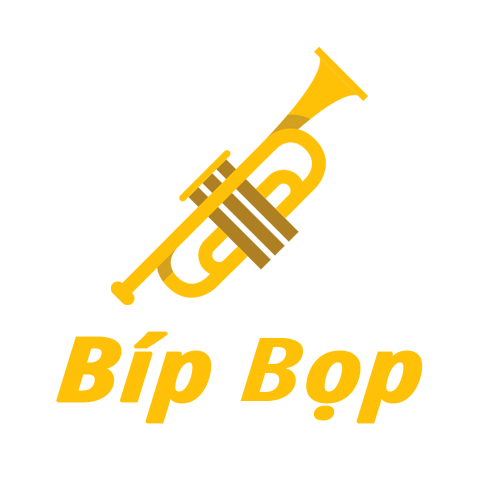
<style>
.page{position:relative;width:480px;height:480px;background:#ffffff}
.page>*{position:absolute;margin:0}
.t1{font:88px "NotoSans-ExtraCondensedBoldItalic";color:#ffc107;font-weight:bold;scale:1.45 1}
</style>
<div class="page">
<p class="t1" style="left:56px;top:331px;width:367px;height:93px">Bíp Bọp</p>
</div>
